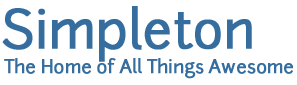
<style>
.page{position:relative;width:297px;height:85px;background:#ffffff}
.page>*{position:absolute;margin:0}
.t1{font:51px "junctionregular";letter-spacing:-0.025em;color:#366d9f;font-weight:bold}
.t2{font:18px "junctionregular";letter-spacing:-0.025em;color:#366d9f;font-weight:bold}
</style>
<div class="page">
<p class="t1" style="left:2px;top:6px;width:250px;height:56px">Simpleton</p>
<p class="t2" style="left:4px;top:58px;width:289px;height:21px">The Home of All Things Awesome</p>
</div>
